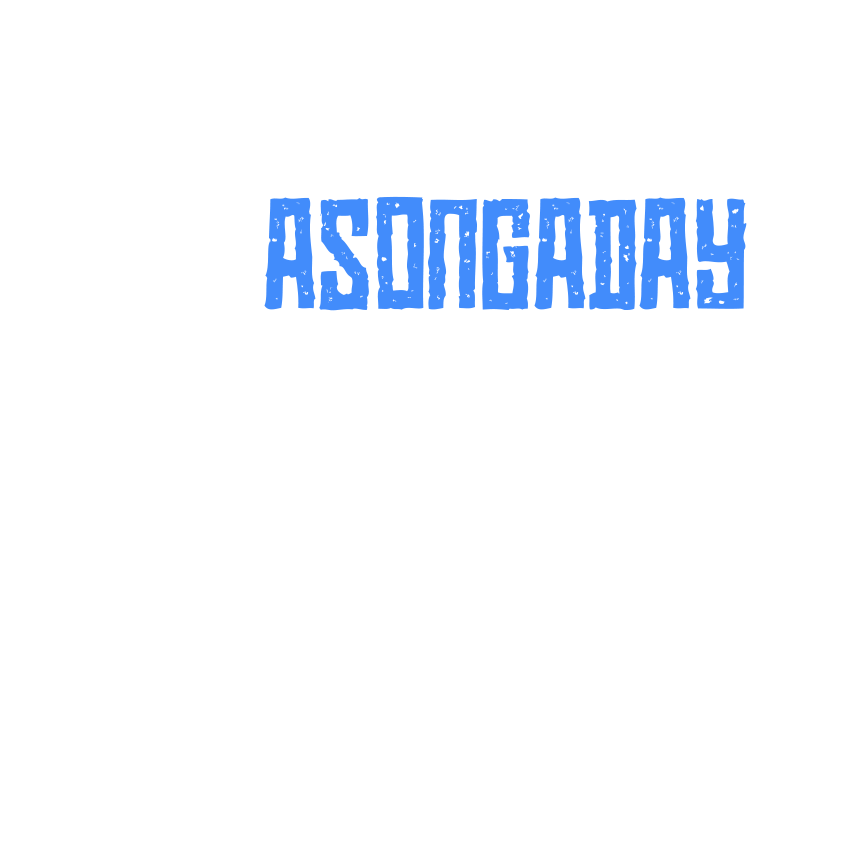
<style>
.page{position:relative;width:848px;height:848px;background:#ffffff}
.page>*{position:absolute;margin:0}
.t1{font:150px "HeatwerkDEMO";color:#428cfb}
</style>
<div class="page">
<p class="t1" style="left:264px;top:196px;width:483px;height:115px">ASongADay</p>
</div>
